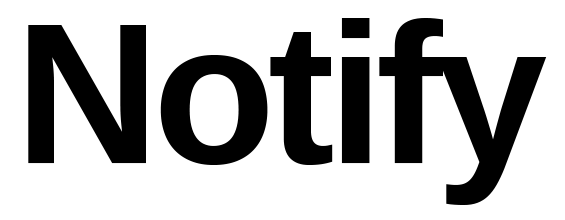
<style>
.page{position:relative;width:565px;height:220px;background:#ffffff}
.page>*{position:absolute;margin:0}
.t1{font:200px "LiberationSans-Bold";letter-spacing:-0.035em;color:#000000}
</style>
<div class="page">
<p class="t1" style="left:28px;top:18px;width:519px;height:187px">Notify</p>
</div>
